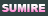
<style>
.page{position:relative;width:48px;height:16px;background:#314242}
.page>*{position:absolute;margin:0}
.t1{font:10.9px "Arial-Black";scale:0.92 1}
</style>
<div class="page">
<p class="t1" style="left:2px;top:4px;width:44px;height:8px">SUMIRE</p>
</div>
